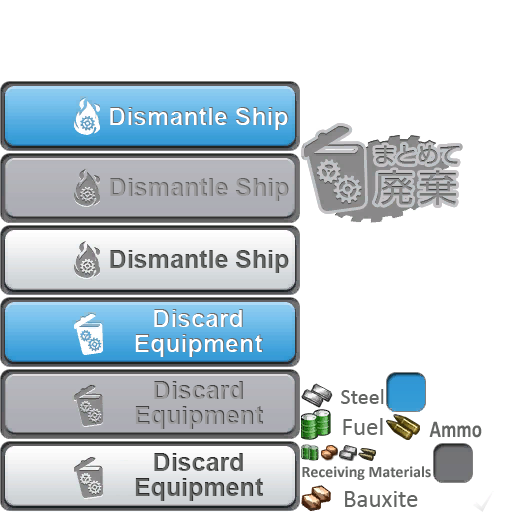
<style>
.page{position:relative;width:512px;height:512px;background:#ffffff}
.page>*{position:absolute;margin:0}
.t1{font:25px "Arial-BoldMT";color:#ffffff}
.t2{font:25px "Arial-BoldMT";color:#9c9b9c}
.t3{font:25px "Arial-BoldMT";color:#636563}
.t4{font:25px/25px "Arial-BoldMT";color:#ffffff}
.t5{font:25px/25px "Arial-BoldMT";color:#9c9b9c}
.t6{font:22px "Calibri";color:#636563}
.t7{font:25px "Calibri";color:#636563}
.t8{font:23.9px "Calibri-Bold";color:#636563;scale:0.79 1}
.t9{font:25px/25px "Arial-BoldMT";color:#636563}
.t10{font:16px "Calibri-Bold";color:#636563}
</style>
<div class="page">
<p class="t1" style="left:110px;top:107px;width:179px;height:23px">Dismantle Ship</p>
<p class="t2" style="left:110px;top:178px;width:179px;height:23px">Dismantle Ship</p>
<p class="t3" style="left:110px;top:250px;width:179px;height:23px">Dismantle Ship</p>
<p class="t4" style="left:135px;top:309px;width:128px;height:48px;text-align:center">Discard <br>Equipment</p>
<p class="t5" style="left:135px;top:381px;width:128px;height:48px;text-align:center">Discard <br>Equipment</p>
<p class="t6" style="left:341px;top:389px;width:43px;height:15px">Steel</p>
<p class="t7" style="left:343px;top:418px;width:40px;height:17px">Fuel</p>
<p class="t8" style="left:429px;top:421px;width:53px;height:17px">Ammo</p>
<p class="t9" style="left:135px;top:453px;width:128px;height:48px;text-align:center">Discard <br>Equipment</p>
<p class="t10" style="left:302px;top:466px;width:129px;height:14px">Receiving Materials</p>
<p class="t7" style="left:345px;top:491px;width:73px;height:16px">Bauxite</p>
</div>
